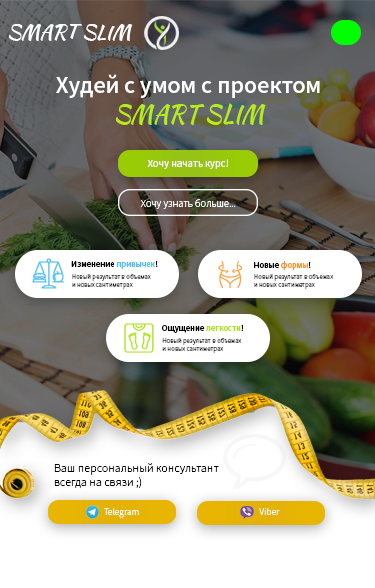
<style>
.page{position:relative;width:375px;height:588px;background:#ffffff}
.page>*{position:absolute;margin:0}
.t1{font:19.4px "KaushanScript-Regular";color:#ffffff}
.t2{font:24px/30px "SourceSansPro-Semibold";color:#ffffff}
.t3{font:24px/30px "KaushanScript-Regular";color:#b6ed18}
.t4{font:10.5px "SourceSansPro-Regular";color:#ffffff}
.t5{font:10.5px "SourceSansPro-Light";color:#ffffff}
.t6{font:8.7px "SourceSansPro-Semibold";color:#000000}
.t7{font:8.7px "SourceSansPro-Semibold";color:#55bff1}
.t8{font:8.7px "SourceSansPro-Semibold";color:#f89831}
.t9{font:6.8px "SourceSansPro-Light";color:#000000}
.t10{font:8.7px "SourceSansPro-Semibold";color:#abe31c}
.t11{font:12px "SourceSansPro-Light";color:#000000}
.t12{font:9.6px "SourceSansPro-Light";color:#ffffff}
</style>
<div class="page">
<p class="t1" style="left:9px;top:24px;width:124px;height:17px">SMART SLIM</p>
<p class="t2" style="left:56px;top:74px;width:264px;height:52px;text-align:center">Худей с умом с проектом<br><span class="t3">SMART SLIM</span></p>
<p class="t4" style="left:147px;top:159px;width:81px;height:10px">Хочу начать курс!</p>
<p class="t5" style="left:141px;top:199px;width:95px;height:10px">Хочу узнать больше...</p>
<p class="t6" style="left:71px;top:260px;width:87px;height:9px">Изменение <span class="t7">привычек</span>!</p>
<p class="t6" style="left:254px;top:261px;width:57px;height:9px">Новые <span class="t8">формы</span>!</p>
<p class="t9" style="left:72px;top:274px;width:79px;height:15px">Новый результат в объемах<br>и новых сантиметрах</p>
<p class="t9" style="left:254px;top:274px;width:80px;height:15px">Новый результат в объемах<br>и новых сантиметрах</p>
<p class="t6" style="left:162px;top:324px;width:81px;height:9px">Ощущение <span class="t10">легкости</span>!</p>
<p class="t9" style="left:162px;top:338px;width:80px;height:15px">Новый результат в объемах<br>и новых сантиметрах</p>
<p class="t11" style="left:54px;top:463px;width:165px;height:26px">Ваш персональный консультант<br>всегда на связи ;)</p>
<p class="t12" style="left:103px;top:508px;width:36px;height:10px">Telegram</p>
<p class="t12" style="left:259px;top:508px;width:21px;height:7px">Viber</p>
</div>
